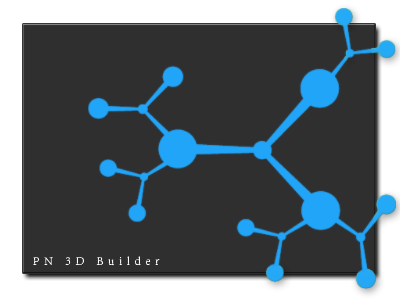
<style>
.page{position:relative;width:400px;height:300px;background:#2f2f2f}
.page>*{position:absolute;margin:0}
.t1{font:12px "AdobeSongStd-Light";letter-spacing:0.4em;color:#fcfcfc}
</style>
<div class="page">
<p class="t1" style="left:33px;top:256px;width:127px;height:10px">PN 3D Builder</p>
</div>
